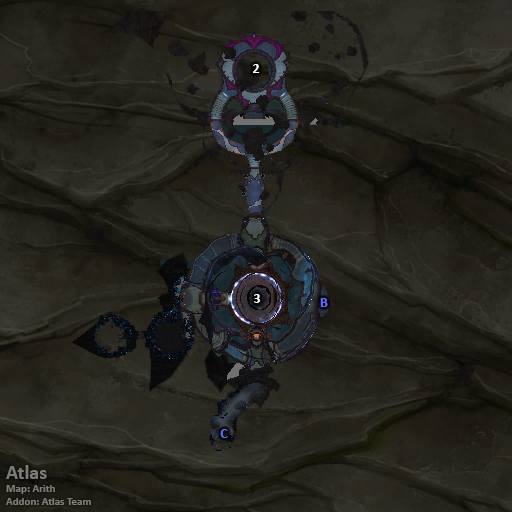
<style>
.page{position:relative;width:512px;height:512px}
.page>*{position:absolute;margin:0}
.t1{font:14px "Calibri-Bold";color:#ffffff}
.t2{font:14px "Calibri-Bold";color:#6666ff}
.t3{font:11px "Calibri-Bold";color:#7d7c7a}
.t4{font:20px "Calibri-Bold";color:#7d7c7a}
</style>
<div class="page">
<p class="t1" style="left:253px;top:64px;width:7px;height:9px">2</p>
<p class="t1" style="left:254px;top:294px;width:6px;height:9px">3</p>
<p class="t2" style="left:320px;top:298px;width:8px;height:9px">B</p>
<p class="t2" style="left:220px;top:429px;width:8px;height:9px">C</p>
<p class="t3" style="left:6px;top:465px;width:85px;height:40px"><span class="t4">Atlas<br></span>Map: Arith<br>Addon: Atlas Team</p>
</div>
